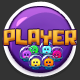
<style>
.page{position:relative;width:80px;height:80px;background:#333333}
.page>*{position:absolute;margin:0}
.t1{font:22px "Chunq"}
</style>
<div class="page">
<p class="t1" style="left:3px;top:29px;width:74px;height:16px">Player</p>
</div>
